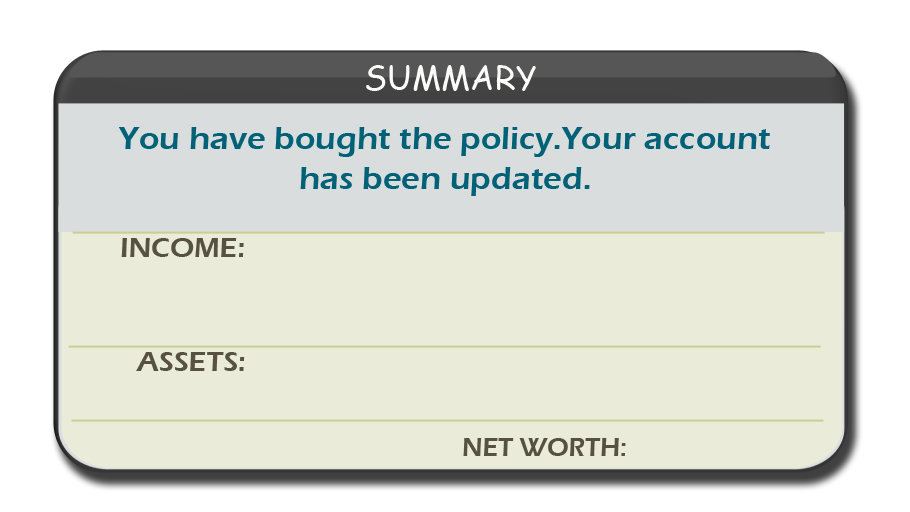
<style>
.page{position:relative;width:910px;height:512px;background:#eaebd8}
.page>*{position:absolute;margin:0}
.t1{font:33.3px "ComicSansMS";color:#fbfbfa}
.t2{font:33.3px "ErasITC-Demi";color:#016277}
.t3{font:28.9px "ErasITC-Demi";color:#575143}
.t4{font:29.1px "ErasITC-Demi";color:#575143}
.t5{font:26.9px "ErasITC-Demi";color:#575143;scale:0.97 1}
</style>
<div class="page">
<p class="t1" style="left:366px;top:65px;width:170px;height:26px">SUMMARY</p>
<p class="t2" style="left:118px;top:127px;width:652px;height:69px;text-align:center">You have bought the policy.Your account<br>has been updated.</p>
<p class="t3" style="left:121px;top:238px;width:123px;height:19px">INCOME:</p>
<p class="t4" style="left:136px;top:352px;width:109px;height:19px">ASSETS:</p>
<p class="t5" style="left:463px;top:438px;width:163px;height:18px">NET WORTH:</p>
</div>
